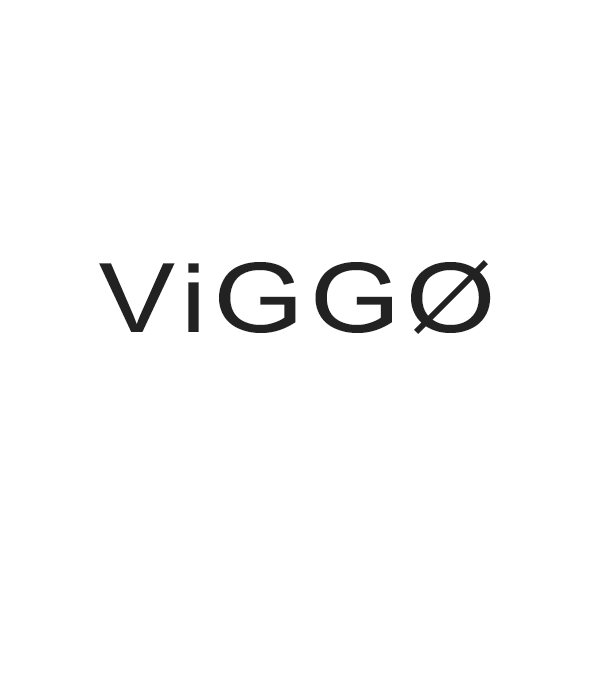
<style>
.page{position:relative;width:600px;height:700px;background:#ffffff}
.page>*{position:absolute;margin:0}
.t1{font:96px "ArialMT";letter-spacing:0.06em;color:#222222;text-transform:uppercase;scale:1.2 1}
.t2{font:96px "ArialMT";letter-spacing:0.06em;color:#222222;scale:1.2 1}
</style>
<div class="page">
<p class="t1" style="left:99px;top:262px;width:392px;height:71px">V<span class="t2">i</span>ggo</p>
</div>
